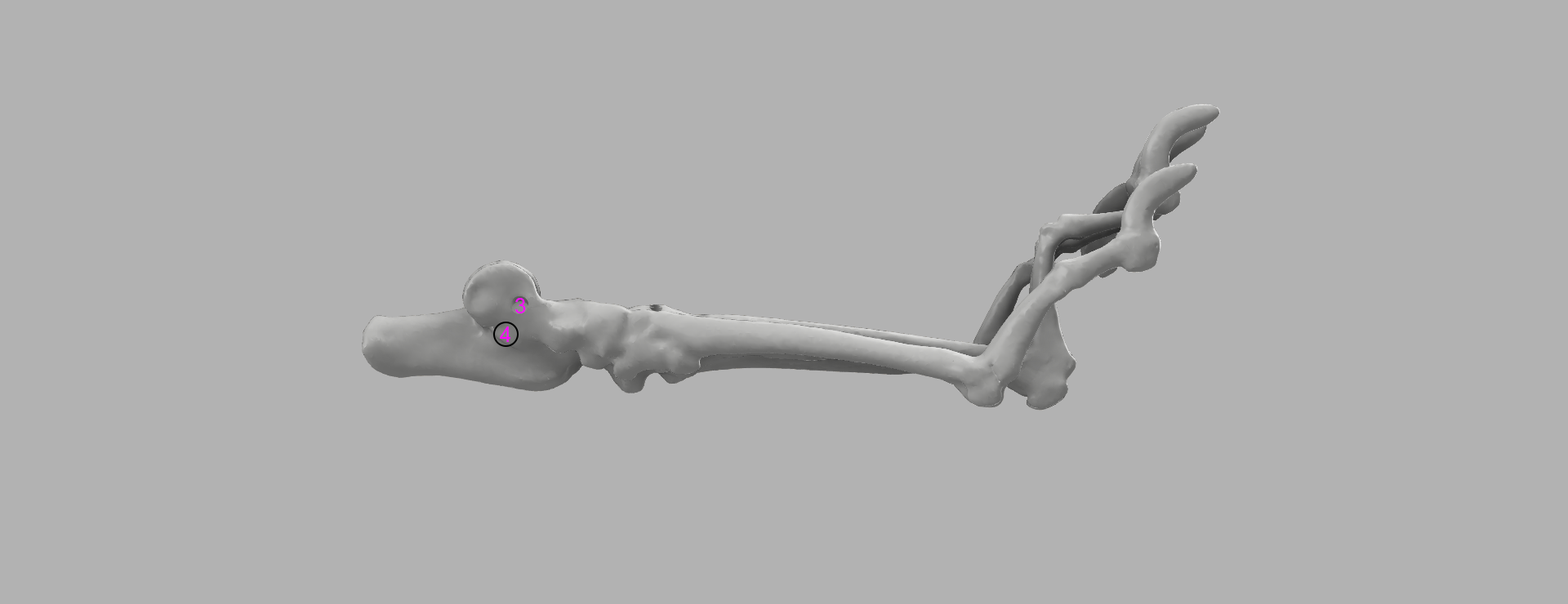
<style>
.page{position:relative;width:1568px;height:604px;background:#b2b2b2}
.page>*{position:absolute;margin:0}
.t1{font:21.2px "ArialMT";letter-spacing:0.06em;color:#ff00ff}
</style>
<div class="page">
<p class="t1" style="left:515px;top:298px;width:11px;height:16px">3</p>
<p class="t1" style="left:500px;top:327px;width:10px;height:15px">4</p>
</div>
